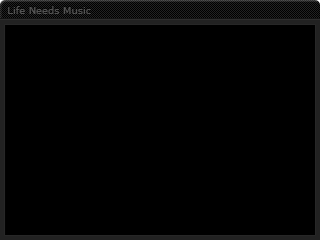
<style>
.page{position:relative;width:320px;height:240px;background:#000000}
.page>*{position:absolute;margin:0}
.t1{font:10px "Verdana";color:#525252}
</style>
<div class="page">
<p class="t1" style="left:8px;top:6px;width:83px;height:8px">Life Needs Music</p>
</div>
